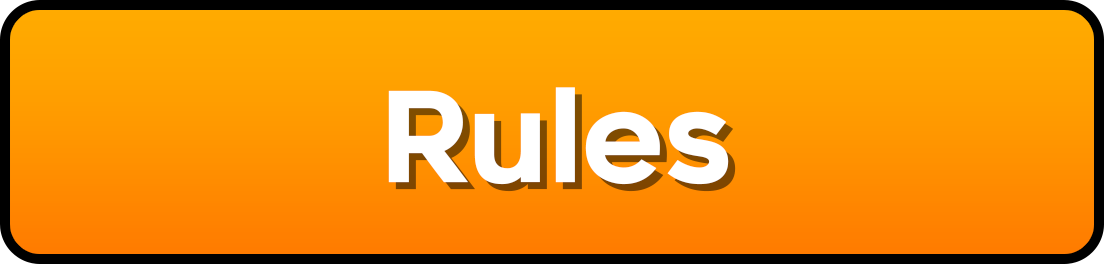
<style>
.page{position:relative;width:1104px;height:264px}
.page>*{position:absolute;margin:0}
.t1{font:124.9px "Renogare-Regular";letter-spacing:-0.05em;color:#ffffff;font-weight:bold}
</style>
<div class="page">
<p class="t1" style="left:388px;top:87px;width:341px;height:98px">Rules</p>
</div>
